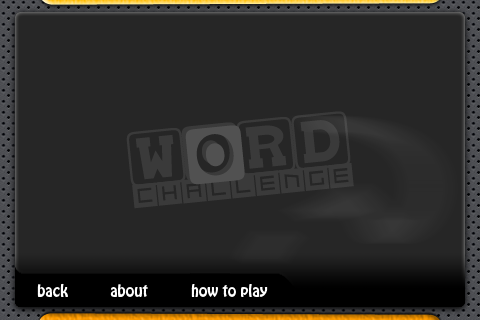
<style>
.page{position:relative;width:480px;height:320px;background:#262626}
.page>*{position:absolute;margin:0}
.t1{font:46px "babybloc";color:#3a3a3a}
.t2{font:46px "babybloc";color:#515151}
.t3{font:36px "Qubix";color:#3a3a3a}
.t4{font:15px "HoboStd";color:#ffffff}
</style>
<div class="page">
<p class="t1" style="left:126px;top:111px;width:225px;height:76px;rotate:-6deg">WoRD</p>
<p class="t2" style="left:185px;top:125px;width:60px;height:60px;rotate:-6deg">o</p>
<p class="t3" style="left:132px;top:163px;width:222px;height:46px;rotate:-6deg">Challenge</p>
<p class="t4" style="left:37px;top:283px;width:31px;height:14px">back</p>
<p class="t4" style="left:110px;top:284px;width:38px;height:13px">about</p>
<p class="t4" style="left:191px;top:284px;width:77px;height:13px">how to play</p>
</div>
